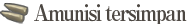
<style>
.page{position:relative;width:196px;height:24px;background:#ffffff}
.page>*{position:absolute;margin:0}
.t1{font:22px "RyuminPro-ExBold";letter-spacing:-0.08em;color:#4d4843;scale:0.9 1}
</style>
<div class="page">
<p class="t1" style="left:34px;top:4px;width:153px;height:21px">Amunisi tersimpan</p>
</div>
